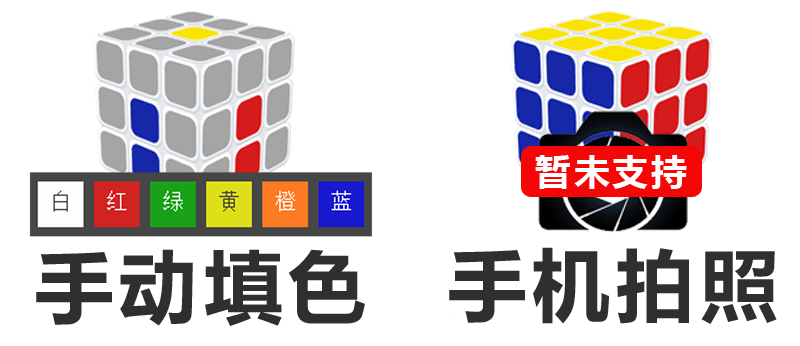
<style>
.page{position:relative;width:800px;height:346px;background:#ffffff}
.page>*{position:absolute;margin:0}
.t1{font:36px "MicrosoftYaHei-Bold";letter-spacing:0.075em;color:#ffffff}
.t2{font:78.3px "MicrosoftYaHei-Bold";letter-spacing:0.075em;color:#2f2f2f}
</style>
<div class="page">
<p class="t1" style="left:535px;top:155px;width:152px;height:34px">暂未支持</p>
<p class="t2" style="left:36px;top:249px;width:329px;height:77px">手动填色</p>
<p class="t2" style="left:449px;top:247px;width:328px;height:77px">手机拍照</p>
</div>
